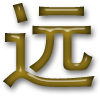
<style>
.page{position:relative;width:100px;height:100px;background:#ffffff}
.page>*{position:absolute;margin:0}
.t1{font:100px "AdobeHeitiStd-Regular"}
</style>
<div class="page">
<p class="t1" style="left:3px;top:2px;width:92px;height:86px">远</p>
</div>
